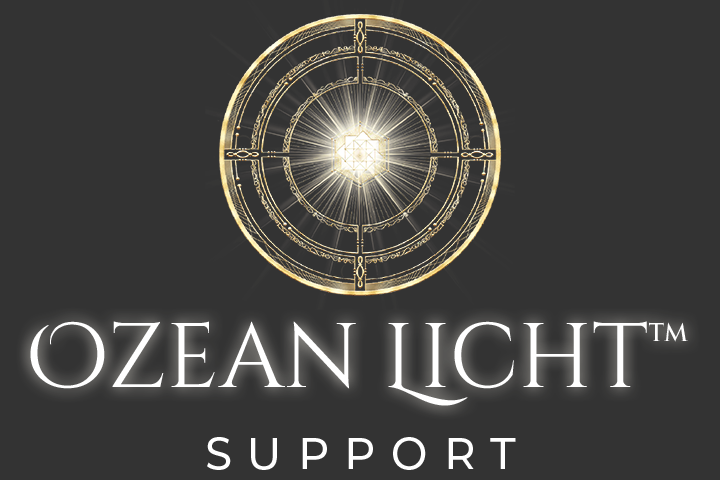
<style>
.page{position:relative;width:720px;height:480px;background:#333333}
.page>*{position:absolute;margin:0}
.t1{font:91.3px "CinzelDecorative-Regular";color:#ffffff}
.t2{font:43.6px "Montserrat-Medium";letter-spacing:0.36em;color:#ffffff;text-transform:uppercase}
</style>
<div class="page">
<p class="t1" style="left:30px;top:321px;width:658px;height:85px">Ozean Licht™</p>
<p class="t2" style="left:207px;top:437px;width:309px;height:33px">SUPPORT</p>
</div>
